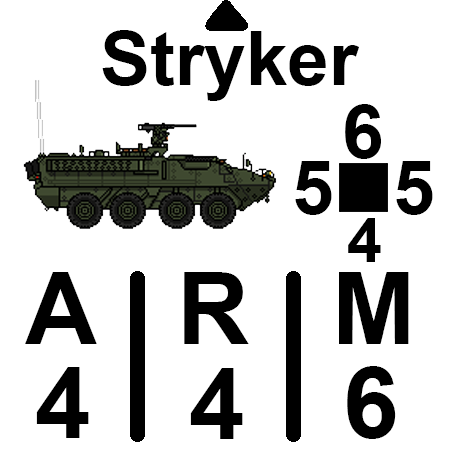
<style>
.page{position:relative;width:450px;height:450px;background:#ffffff}
.page>*{position:absolute;margin:0}
.t1{font:75px "Arial-BoldMT";color:#000000}
.t2{font:62.5px "Arial-BoldMT";color:#000000}
.t3{font:100px "Arial-BoldMT";color:#000000}
</style>
<div class="page">
<p class="t1" style="left:102px;top:30px;width:257px;height:71px">Stryker</p>
<p class="t1" style="left:345px;top:104px;width:36px;height:55px">6</p>
<p class="t1" style="left:295px;top:161px;width:37px;height:54px">5</p>
<p class="t1" style="left:396px;top:161px;width:37px;height:54px">5</p>
<p class="t2" style="left:348px;top:218px;width:33px;height:44px">4</p>
<p class="t3" style="left:25px;top:272px;width:384px;height:72px">A   R   M</p>
<p class="t3" style="left:347px;top:366px;width:49px;height:73px">6</p>
<p class="t3" style="left:36px;top:367px;width:53px;height:71px">4</p>
<p class="t3" style="left:190px;top:368px;width:53px;height:71px">4</p>
</div>
